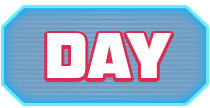
<style>
.page{position:relative;width:210px;height:108px}
.page>*{position:absolute;margin:0}
.t1{font:62.4px "AMCAPEternal";letter-spacing:-0.02em;color:#fefefe}
</style>
<div class="page">
<p class="t1" style="left:47px;top:33px;width:125px;height:45px">DAY</p>
</div>
